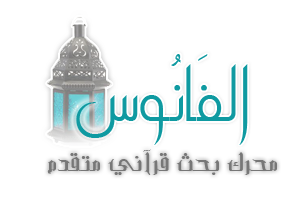
<style>
.page{position:relative;width:300px;height:200px;background:#ffffff}
.page>*{position:absolute;margin:0}
.t1{font:68.7px "ae_Sindibad";letter-spacing:-0.02em;color:#0f9aa1}
.t2{font:21.6px "ae_Rehan";letter-spacing:-0.02em;color:#777777;scale:1.23 1}
</style>
<div class="page">
<p class="t1" style="left:76px;top:54px;width:172px;height:91px">الفَانُوس</p>
<p class="t2" style="left:47px;top:149px;width:230px;height:26px">محرك بحث قرآني متقدم</p>
</div>
